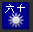
<style>
.page{position:relative;width:33px;height:32px;background:#000090}
.page>*{position:absolute;margin:0}
.t1{font:10.4px "SimSun";color:#ffffff}
</style>
<div class="page">
<p class="t1" style="left:5px;top:4px;width:20px;height:9px">六十</p>
</div>
